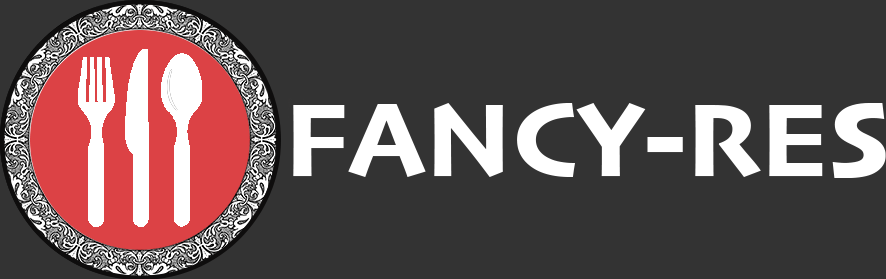
<style>
.page{position:relative;width:886px;height:279px;background:#333333}
.page>*{position:absolute;margin:0}
.t1{font:108.7px "Skia_2.000wght";color:#ffffff}
</style>
<div class="page">
<p class="t1" style="left:293px;top:103px;width:593px;height:75px">FANCY-RES</p>
</div>
